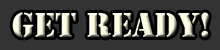
<style>
.page{position:relative;width:220px;height:50px;background:#333333}
.page>*{position:absolute;margin:0}
.t1{font:36px "Stencil"}
</style>
<div class="page">
<p class="t1" style="left:12px;top:12px;width:197px;height:26px">Get Ready!</p>
</div>
